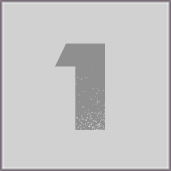
<style>
.page{position:relative;width:171px;height:171px;background:#d1d1d1}
.page>*{position:absolute;margin:0}
.t1{font:121px "Coalition";color:#8f8f8f}
</style>
<div class="page">
<p class="t1" style="left:55px;top:43px;width:51px;height:88px">1</p>
<p class="t1" style="left:55px;top:43px;width:51px;height:88px">1</p>
<p class="t1" style="left:55px;top:43px;width:51px;height:88px">1</p>
</div>
